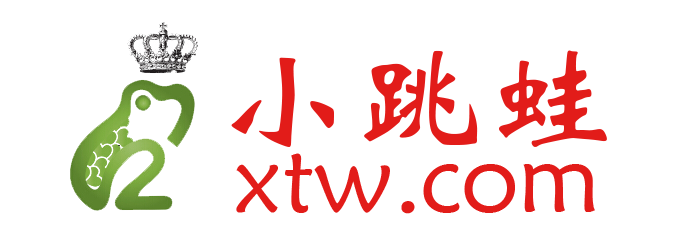
<style>
.page{position:relative;width:700px;height:241px;background:#ffffff}
.page>*{position:absolute;margin:0}
.t1{font:133.3px "STXinwei";color:#e21c19}
.t2{font:96px "STXinwei";color:#e21c19}
</style>
<div class="page">
<p class="t1" style="left:231px;top:50px;width:376px;height:97px">小跳蛙</p>
<p class="t2" style="left:236px;top:153px;width:359px;height:61px">xtw.com</p>
</div>
